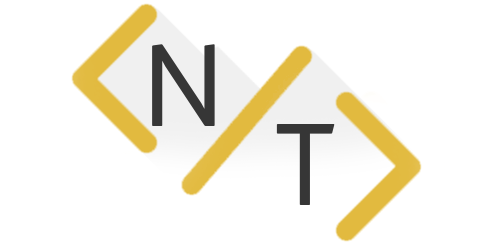
<style>
.page{position:relative;width:500px;height:250px;background:#ffffff}
.page>*{position:absolute;margin:0}
.t1{font:120px "Anivers-Regular";color:#363636}
</style>
<div class="page">
<p class="t1" style="left:152px;top:44px;width:63px;height:82px">N</p>
<p class="t1" style="left:276px;top:124px;width:59px;height:81px">T</p>
</div>
